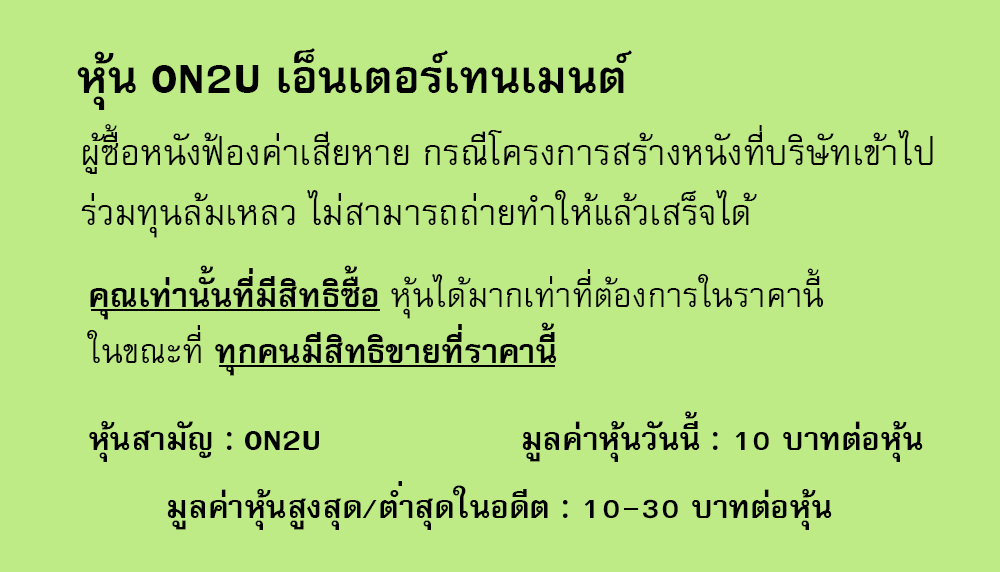
<style>
.page{position:relative;width:1000px;height:572px;background:#beeb85}
.page>*{position:absolute;margin:0}
.t1{font:64px "FreesiaUPCBold";color:#000000}
.t2{font:50px/60px "FreesiaUPC";color:#000000}
.t3{font:47px "FreesiaUPC";color:#000000}
.t4{font:47px "FreesiaUPCBold";color:#000000}
.t5{font:45px "FreesiaUPCBold";color:#000000}
</style>
<div class="page">
<p class="t1" style="left:77px;top:48px;width:555px;height:62px">หุ้น ON2U เอ็นเตอร์เทนเมนต์</p>
<p class="t2" style="left:81px;top:124px;width:852px;height:114px">ผู้ซื้อหนังฟ้องค่าเสียหาย กรณีโครงการสร้างหนังที่บริษัทเข้าไป<br>ร่วมทุนล้มเหลว ไม่สามารถถ่ายทำให้แล้วเสร็จได้</p>
<p class="t3" style="left:87px;top:265px;width:737px;height:111px"><span class="t4">คุณเท่านั้นที่มีสิทธิซื้อ </span>หุ้นได้มากเท่าที่ต้องการในราคานี้<br>ในขณะที่<span class="t4"> ทุกคนมีสิทธิขายที่ราคานี้</span></p>
<p class="t5" style="left:522px;top:411px;width:401px;height:51px">มูลค่าหุ้นวันนี้ : 10 บาทต่อหุ้น</p>
<p class="t5" style="left:89px;top:421px;width:230px;height:41px">หุ้นสามัญ : ON2U</p>
<p class="t5" style="left:167px;top:481px;width:665px;height:49px">มูลค่าหุ้นสูงสุด/ต่ำสุดในอดีต : 10-30 บาทต่อหุ้น</p>
</div>
